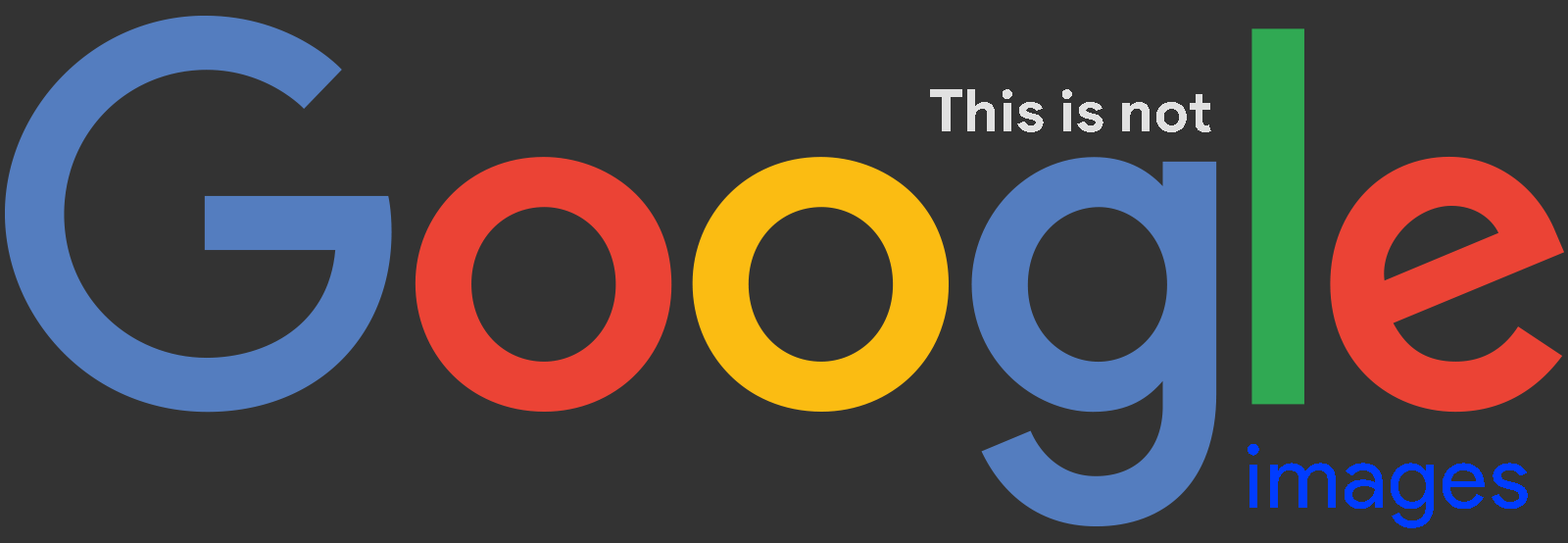
<style>
.page{position:relative;width:1568px;height:543px;background:#333333}
.page>*{position:absolute;margin:0}
.t1{font:58.8px "ProductSans-Bold";letter-spacing:0.02em;color:#e1e1e1}
.t2{font:88.2px "ProductSans-Regular";letter-spacing:0.02em;color:#003cff}
</style>
<div class="page">
<p class="t1" style="left:930px;top:89px;width:281px;height:43px">This is not</p>
<p class="t2" style="left:1248px;top:444px;width:280px;height:84px">images</p>
</div>
